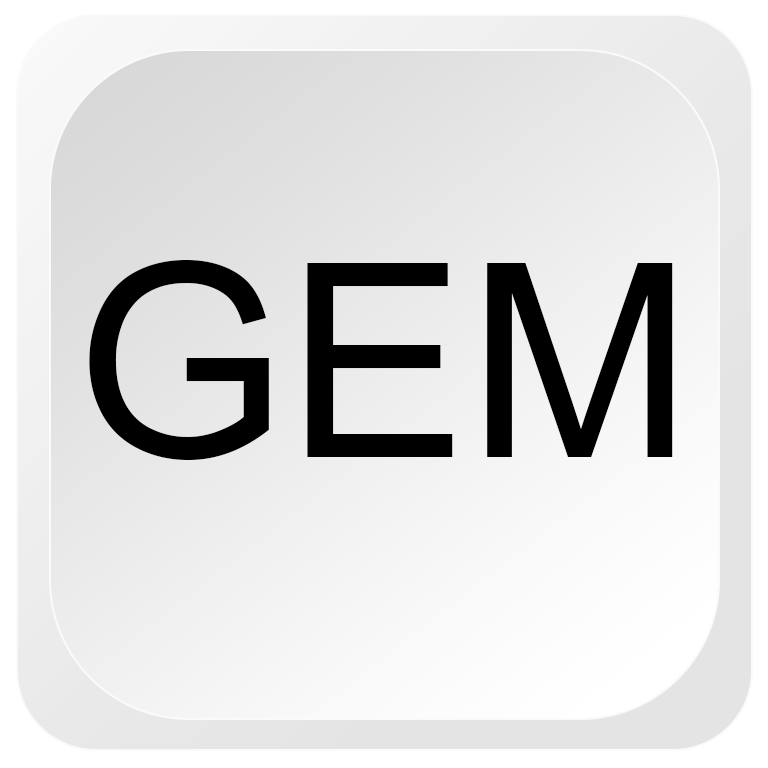
<style>
.page{position:relative;width:768px;height:768px}
.page>*{position:absolute;margin:0}
.t1{font:271px "ArialMT";color:#000000}
</style>
<div class="page">
<p class="t1" style="left:89px;top:260px;width:584px;height:200px">GEM</p>
</div>
